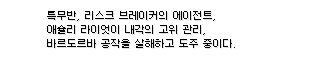
<style>
.page{position:relative;width:320px;height:60px;background:#ffffff}
.page>*{position:absolute;margin:0}
.t1{font:10px/14px "Galmuri9-Regular";color:#000000}
</style>
<div class="page">
<p class="t1" style="left:47px;top:11px;width:188px;height:37px">특무반, 리스크 브레이커의 에이전트, <br>애슐리 라이엇이 내각의 고위 관리, <br>바르도르바 공작을 살해하고 도주 중이다.</p>
</div>
